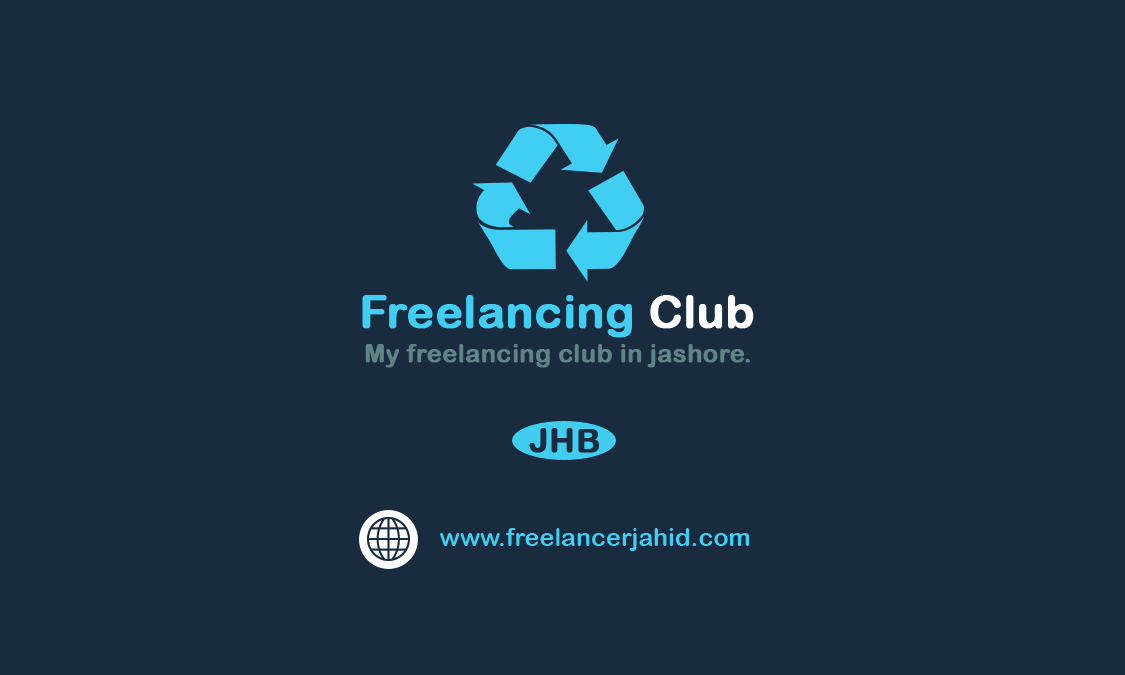
<style>
.page{position:relative;width:1125px;height:675px;background:#192c3f}
.page>*{position:absolute;margin:0}
.t1{font:45.8px "ArialRoundedMTBold";color:#41cef3;font-weight:bold}
.t2{font:45.8px "ArialRoundedMTBold";color:#ffffff;font-weight:bold}
.t3{font:25px "ArialRoundedMTBold";color:#618386;font-weight:bold}
.t4{font:33.3px "ArialRoundedMTBold";color:#192c3f;font-weight:bold}
.t5{font:25px "ArialRoundedMTBold";color:#41cef3}
</style>
<div class="page">
<p class="t1" style="left:362px;top:295px;width:392px;height:43px">Freelancing <span class="t2">Club</span></p>
<p class="t3" style="left:365px;top:344px;width:385px;height:24px">My freelancing club in jashore.</p>
<p class="t4" style="left:529px;top:428px;width:70px;height:25px">JHB</p>
<p class="t5" style="left:440px;top:528px;width:310px;height:23px">www.freelancerjahid.com</p>
</div>
